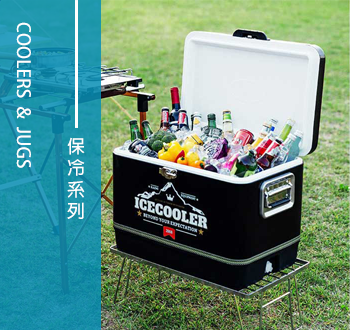
<style>
.page{position:relative;width:350px;height:330px}
.page>*{position:absolute;margin:0}
.t1{font:18px "AdobeFanHeitiStd-Bold";color:#fefefe}
</style>
<div class="page">
<p class="t1" style="left:16px;top:22px;width:15px;height:146px">COOLERS  &amp;  JUGS</p>
<p class="t1" style="left:67px;top:137px;width:18px;height:82px">保<br>冷<br>系<br>列</p>
</div>
